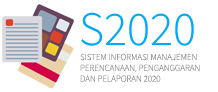
<style>
.page{position:relative;width:218px;height:92px;background:#ffffff}
.page>*{position:absolute;margin:0}
.t1{font:48px "SourceSansRoman-Light";color:#03a9f4}
.t2{font:9px "SourceSansVariable-Roman";color:#868686}
</style>
<div class="page">
<p class="t1" style="left:81px;top:12px;width:113px;height:34px">S2020</p>
<p class="t2" style="left:80px;top:53px;width:120px;height:29px">SISTEM INFORMASI MANAJEMEN<br>PERENCANAAN, PENGANGGARAN<br>DAN PELAPORAN 2020</p>
</div>
